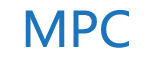
<style>
.page{position:relative;width:150px;height:57px;background:#ffffff}
.page>*{position:absolute;margin:0}
.t1{font:48px "MicrosoftYaHei";color:#1c75bc}
</style>
<div class="page">
<p class="t1" style="left:25px;top:10px;width:104px;height:38px">MPC</p>
</div>
